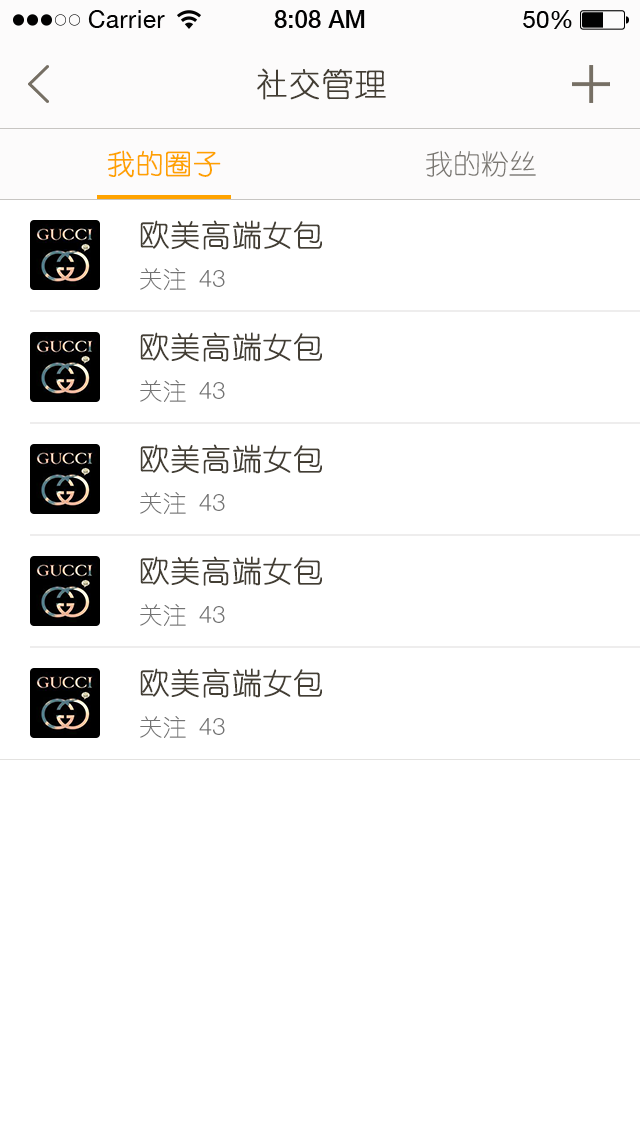
<style>
.page{position:relative;width:640px;height:1136px;background:#ffffff}
.page>*{position:absolute;margin:0}
.t1{font:32px "YouYuan";color:#433d33;text-transform:uppercase;font-weight:bold}
.t2{font:28px "YouYuan";color:#fea200;text-transform:uppercase;font-weight:bold}
.t3{font:28px "YouYuan";color:#7a7772;text-transform:uppercase}
.t4{font:30px "YouYuan";color:#433e34;text-transform:uppercase;font-weight:bold}
.t5{font:24px "YouYuan";color:#737373;text-transform:uppercase}
.t6{font:24px "HelveticaNeueLTPro-Lt";color:#737373;text-transform:uppercase}
</style>
<div class="page">
<p class="t1" style="left:257px;top:68px;width:129px;height:32px">社交管理</p>
<p class="t2" style="left:107px;top:150px;width:114px;height:28px">我的圈子</p>
<p class="t3" style="left:426px;top:150px;width:110px;height:27px">我的粉丝</p>
<p class="t4" style="left:140px;top:220px;width:182px;height:30px">欧美高端女包</p>
<p class="t5" style="left:140px;top:268px;width:85px;height:22px">关注 <span class="t6">43</span></p>
<p class="t4" style="left:140px;top:332px;width:182px;height:30px">欧美高端女包</p>
<p class="t5" style="left:140px;top:380px;width:85px;height:22px">关注 <span class="t6">43</span></p>
<p class="t4" style="left:140px;top:444px;width:182px;height:30px">欧美高端女包</p>
<p class="t5" style="left:140px;top:492px;width:85px;height:22px">关注 <span class="t6">43</span></p>
<p class="t4" style="left:140px;top:556px;width:182px;height:30px">欧美高端女包</p>
<p class="t5" style="left:140px;top:604px;width:85px;height:22px">关注 <span class="t6">43</span></p>
<p class="t4" style="left:140px;top:668px;width:182px;height:30px">欧美高端女包</p>
<p class="t5" style="left:140px;top:716px;width:85px;height:22px">关注 <span class="t6">43</span></p>
</div>
